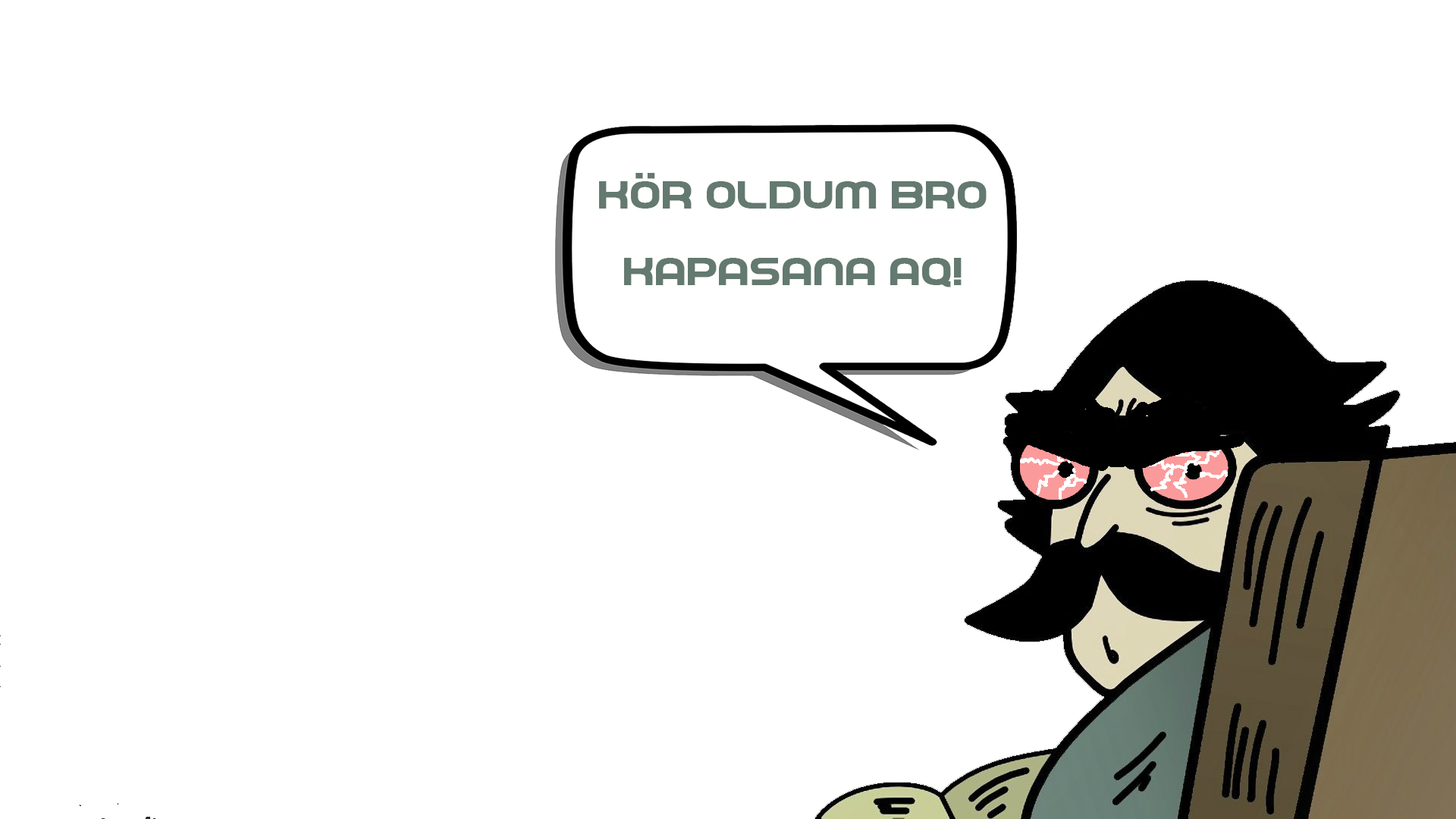
<style>
.page{position:relative;width:1456px;height:819px;background:#ffffff}
.page>*{position:absolute;margin:0}
.t1{font:40.4px "GamePlayed";color:#647970;text-transform:uppercase;scale:1.2 1}
</style>
<div class="page">
<p class="t1" style="left:599px;top:173px;width:388px;height:36px">kör oldum bro</p>
<p class="t1" style="left:624px;top:258px;width:338px;height:29px">kapasana aq!</p>
</div>
